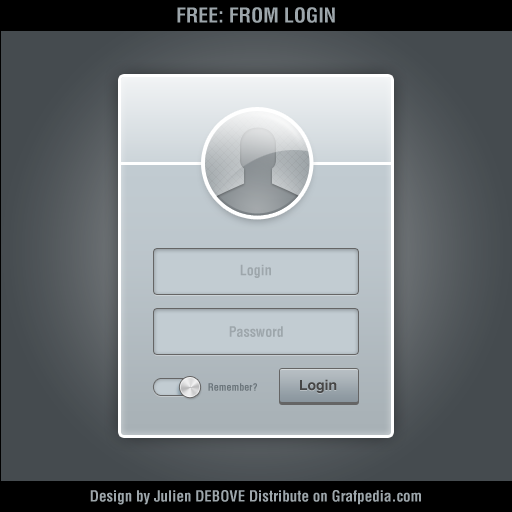
<style>
.page{position:relative;width:512px;height:512px}
.page>*{position:absolute;margin:0}
.t1{font:20px "HelveticaLT-Condensed-Bold";color:#9da6ab}
.t2{font:14px "HelveticaLT-Condensed-Bold";color:#9da6ab}
.t3{font:10px "HelveticaLT-Condensed-Bold";color:#6a747a}
.t4{font:14px "HelveticaLT-Bold";color:#464646}
.t5{font:15px "HelveticaLT-Condensed-Bold";color:#9da6ab}
</style>
<div class="page">
<p class="t1" style="left:177px;top:7px;width:158px;height:16px">FREE: FROM LOGIN</p>
<p class="t2" style="left:240px;top:264px;width:31px;height:14px">Login</p>
<p class="t2" style="left:229px;top:326px;width:54px;height:11px">Password</p>
<p class="t3" style="left:208px;top:383px;width:49px;height:8px">Remember?</p>
<p class="t4" style="left:300px;top:379px;width:37px;height:14px">Login</p>
<p class="t5" style="left:90px;top:490px;width:331px;height:15px">Design by Julien DEBOVE Distribute on Grafpedia.com</p>
</div>
